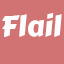
<style>
.page{position:relative;width:64px;height:64px;background:#d27373}
.page>*{position:absolute;margin:0}
.t1{font:29px "CarterOne";color:#fcfcfc}
</style>
<div class="page">
<p class="t1" style="left:2px;top:13px;width:60px;height:24px">Flail</p>
</div>
